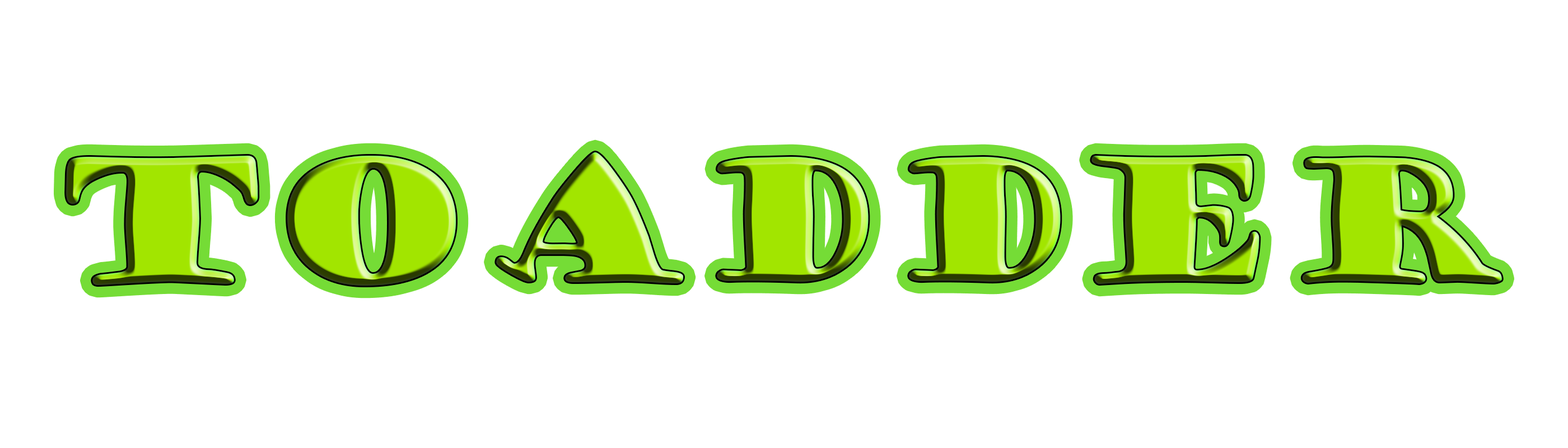
<style>
.page{position:relative;width:1568px;height:448px;background:#ffffff}
.page>*{position:absolute;margin:0}
.t1{font:168px "GoudyStout"}
</style>
<div class="page">
<p class="t1" style="left:66px;top:152px;width:1436px;height:134px">toadder</p>
</div>
